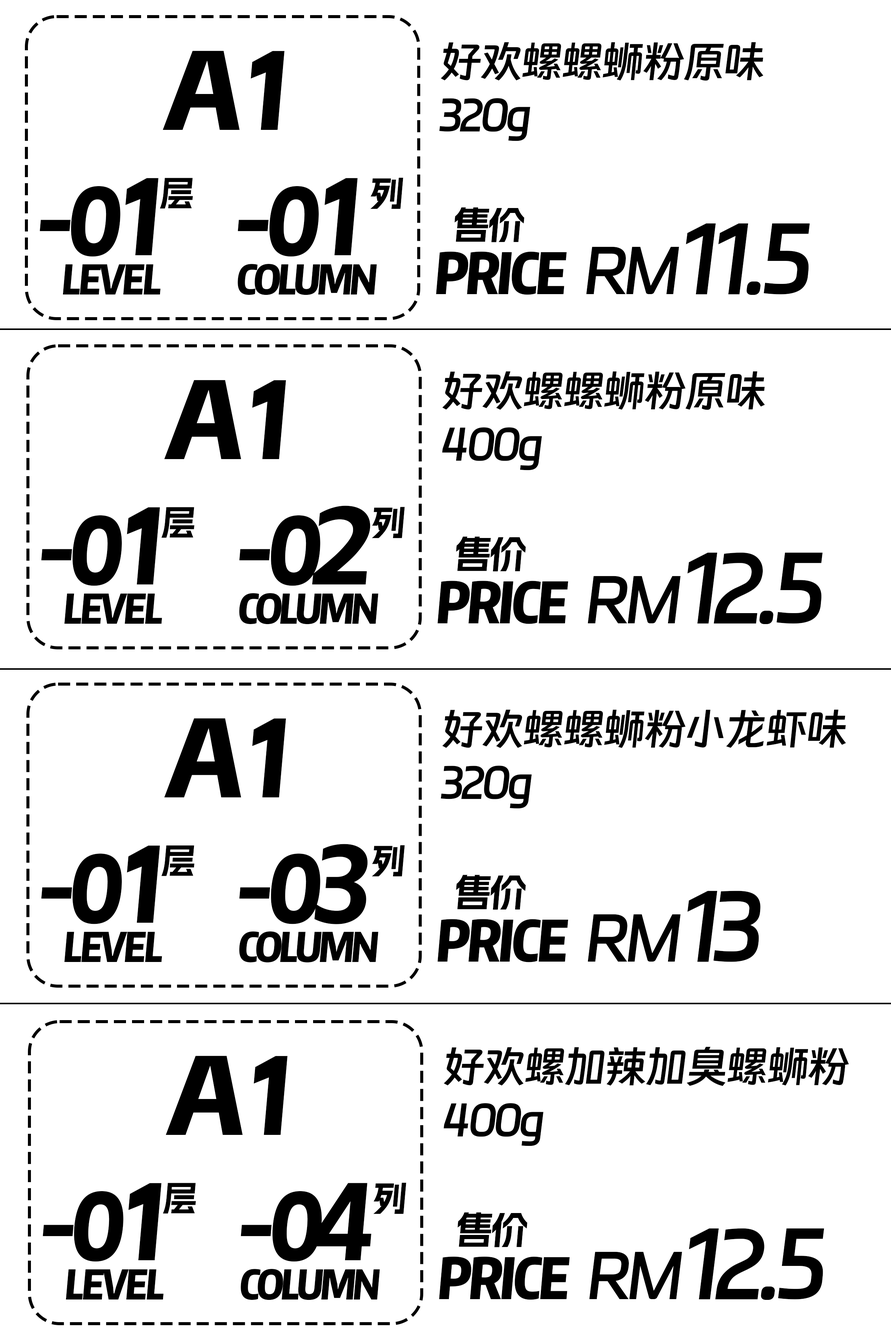
<style>
.page{position:relative;width:891px;height:1338px;background:#ffffff}
.page>*{position:absolute;margin:0}
.t1{font:44px "DingTalk-JinBuTi";letter-spacing:-0.08em;color:#000000;text-transform:uppercase}
.t2{font:44px "DingTalk-JinBuTi";letter-spacing:-0.08em;color:#000000}
.t3{font:113.2px "AlimamaShuHeiTi-Bold";letter-spacing:-0.1em;color:#000000;text-transform:uppercase}
.t4{font:97.2px "AlimamaShuHeiTi-Bold";letter-spacing:-0.1em;color:#000000;text-transform:uppercase}
.t5{font:97.2px "AlimamaShuHeiTi-Bold";letter-spacing:-0.16em;color:#000000;text-transform:uppercase}
.t6{font:110.7px "AlimamaShuHeiTi-Bold";letter-spacing:-0.16em;color:#000000;text-transform:uppercase}
.t7{font:34.7px "AlimamaShuHeiTi-Bold";letter-spacing:-0.1em;color:#000000;text-transform:uppercase}
.t8{font:97.2px "AlimamaShuHeiTi-Bold";letter-spacing:-0.15em;color:#000000;text-transform:uppercase}
.t9{font:110.7px "AlimamaShuHeiTi-Bold";letter-spacing:-0.15em;color:#000000;text-transform:uppercase}
.t10{font:37.9px "AlimamaShuHeiTi-Bold";letter-spacing:-0.08em;color:#000000;text-transform:uppercase}
.t11{font:94.4px "DingTalk-JinBuTi";letter-spacing:-0.08em;color:#000000;text-transform:uppercase}
.t12{font:56.8px "WenYue-XinQingNianTi-NC-W8";letter-spacing:-0.05em;color:#000000;text-transform:uppercase}
.t13{font:62.9px "DingTalk-JinBuTi";letter-spacing:-0.08em;color:#000000;text-transform:uppercase}
.t14{font:40.9px "WenYue-XinQingNianTi-NC-W8";letter-spacing:-0.05em;color:#000000;text-transform:uppercase}
.t15{font:40.9px "WenYue-XinQingNianTi-NC-W8";letter-spacing:-0.08em;color:#000000;text-transform:uppercase}
</style>
<div class="page">
<p class="t1" style="left:439px;top:42px;width:325px;height:99px">好欢螺螺蛳粉原味 <br>320<span class="t2">g</span></p>
<p class="t3" style="left:163px;top:51px;width:122px;height:79px">A1</p>
<p class="t4" style="left:40px;top:178px;width:119px;height:79px">-<span class="t5">0</span><span class="t6">1</span></p>
<p class="t7" style="left:160px;top:178px;width:33px;height:31px">层</p>
<p class="t4" style="left:238px;top:178px;width:120px;height:79px">-<span class="t8">0</span><span class="t9">1</span></p>
<p class="t7" style="left:370px;top:177px;width:33px;height:32px">列</p>
<p class="t10" style="left:455px;top:207px;width:70px;height:35px">售价</p>
<p class="t11" style="left:686px;top:223px;width:124px;height:72px">11.5</p>
<p class="t12" style="left:436px;top:251px;width:131px;height:44px">pRICE</p>
<p class="t13" style="left:587px;top:246px;width:92px;height:48px">RM</p>
<p class="t14" style="left:63px;top:264px;width:98px;height:30px">Level</p>
<p class="t15" style="left:238px;top:264px;width:139px;height:31px">COLUMN</p>
<p class="t1" style="left:442px;top:371px;width:323px;height:99px">好欢螺螺蛳粉原味<br>400<span class="t2">g</span></p>
<p class="t3" style="left:164px;top:380px;width:122px;height:79px">A1</p>
<p class="t4" style="left:41px;top:507px;width:119px;height:79px">-<span class="t5">0</span><span class="t6">1</span></p>
<p class="t7" style="left:162px;top:507px;width:33px;height:31px">层</p>
<p class="t4" style="left:239px;top:505px;width:132px;height:81px">-<span class="t8">0</span><span class="t9">2</span></p>
<p class="t7" style="left:372px;top:507px;width:33px;height:31px">列</p>
<p class="t10" style="left:456px;top:536px;width:70px;height:35px">售价</p>
<p class="t11" style="left:688px;top:552px;width:135px;height:72px">12.5</p>
<p class="t12" style="left:438px;top:580px;width:131px;height:44px">pRICE</p>
<p class="t13" style="left:588px;top:576px;width:93px;height:47px">RM</p>
<p class="t14" style="left:64px;top:593px;width:98px;height:31px">Level</p>
<p class="t15" style="left:239px;top:593px;width:140px;height:31px">COLUMN</p>
<p class="t1" style="left:441px;top:709px;width:406px;height:99px">好欢螺螺蛳粉小龙虾味<br>320<span class="t2">g</span></p>
<p class="t3" style="left:164px;top:718px;width:122px;height:79px">A1</p>
<p class="t4" style="left:41px;top:845px;width:119px;height:79px">-<span class="t5">0</span><span class="t6">1</span></p>
<p class="t7" style="left:162px;top:845px;width:33px;height:31px">层</p>
<p class="t4" style="left:239px;top:844px;width:129px;height:80px">-<span class="t8">0</span><span class="t9">3</span></p>
<p class="t7" style="left:372px;top:845px;width:33px;height:31px">列</p>
<p class="t10" style="left:456px;top:874px;width:70px;height:36px">售价</p>
<p class="t11" style="left:688px;top:890px;width:73px;height:72px">13</p>
<p class="t13" style="left:588px;top:914px;width:93px;height:47px">RM</p>
<p class="t12" style="left:438px;top:919px;width:131px;height:43px">pRICE</p>
<p class="t14" style="left:64px;top:931px;width:98px;height:31px">Level</p>
<p class="t15" style="left:239px;top:931px;width:140px;height:31px">COLUMN</p>
<p class="t1" style="left:444px;top:1046px;width:406px;height:100px">好欢螺加辣加臭螺蛳粉<br>400<span class="t2">g</span></p>
<p class="t3" style="left:166px;top:1055px;width:122px;height:80px">A1</p>
<p class="t4" style="left:43px;top:1182px;width:119px;height:79px">-<span class="t5">0</span><span class="t6">1</span></p>
<p class="t7" style="left:163px;top:1182px;width:33px;height:31px">层</p>
<p class="t4" style="left:241px;top:1182px;width:131px;height:79px">-<span class="t8">0</span><span class="t9">4</span></p>
<p class="t7" style="left:373px;top:1182px;width:33px;height:32px">列</p>
<p class="t10" style="left:458px;top:1212px;width:70px;height:35px">售价</p>
<p class="t11" style="left:689px;top:1228px;width:136px;height:71px">12.5</p>
<p class="t13" style="left:590px;top:1251px;width:92px;height:48px">RM</p>
<p class="t12" style="left:439px;top:1256px;width:131px;height:43px">pRICE</p>
<p class="t14" style="left:66px;top:1269px;width:98px;height:30px">Level</p>
<p class="t15" style="left:241px;top:1269px;width:139px;height:31px">COLUMN</p>
</div>
